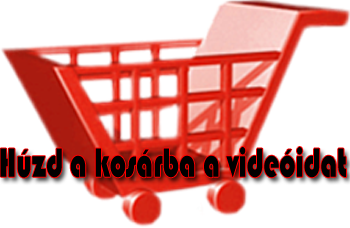
<style>
.page{position:relative;width:350px;height:228px;background:#ffffff}
.page>*{position:absolute;margin:0}
.t1{font:42.3px "Bauhaus93";color:#000000;scale:0.68 1}
</style>
<div class="page">
<p class="t1" style="left:0px;top:147px;width:346px;height:31px">Húzd a kosárba a videóidat</p>
</div>
